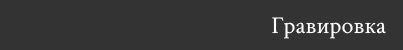
<style>
.page{position:relative;width:403px;height:50px;background:#333333}
.page>*{position:absolute;margin:0}
.t1{font:24px "CrimsonText-Regular";color:#ffffff}
</style>
<div class="page">
<p class="t1" style="left:272px;top:17px;width:114px;height:22px">Гравировка</p>
</div>
